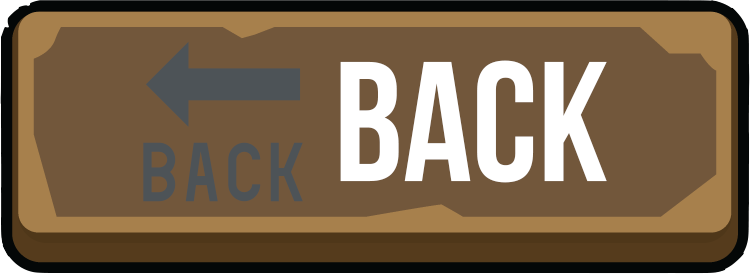
<style>
.page{position:relative;width:750px;height:274px;background:#72573b}
.page>*{position:absolute;margin:0}
.t1{font:170px "UTM-Bebas";color:#ffffff}
.t2{font:170px "EmojiOneColor";color:#ffffff}
</style>
<div class="page">
<p class="t1" style="left:143px;top:41px;width:464px;height:161px"><span class="t2">🔙</span> BACK</p>
</div>
